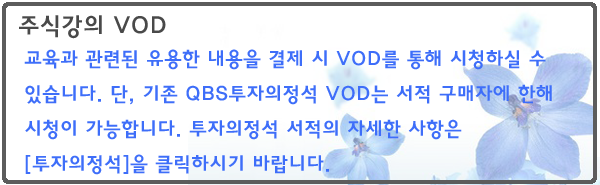
<style>
.page{position:relative;width:600px;height:185px;background:#ffffff}
.page>*{position:absolute;margin:0}
.t1{font:24px "HaanYGodic24";color:#494949}
.t2{font:20px "HaanYGodic24";color:#3e6ef9}
</style>
<div class="page">
<p class="t1" style="left:19px;top:15px;width:147px;height:24px">주식강의 VOD</p>
<p class="t2" style="left:24px;top:49px;width:528px;height:126px">교육과 관련된 유용한 내용을 결제 시 VOD를 통해 시청하실 수 있습니다. 단, 기존 QBS투자의정석 VOD는 서적 구매자에 한해 시청이 가능합니다. 투자의정석 서적의 자세한 사항은 [투자의정석]을 클릭하시기 바랍니다.</p>
</div>
